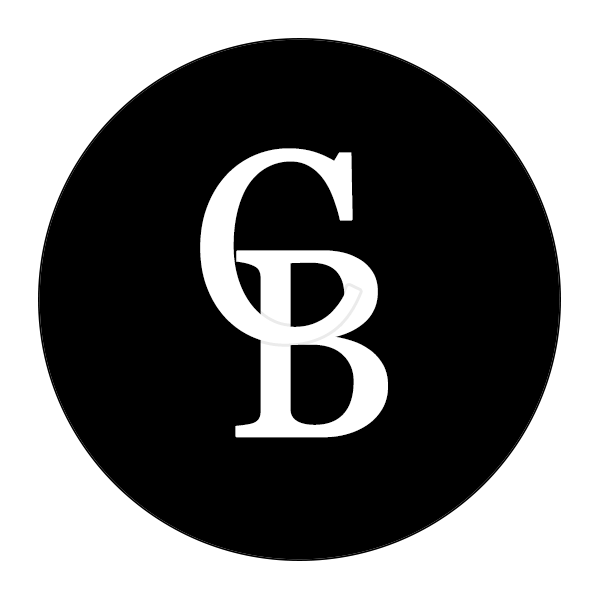
<style>
.page{position:relative;width:600px;height:600px;background:#000000}
.page>*{position:absolute;margin:0}
.t1{font:266.6px "Georgia";color:#ffffff;font-weight:bold}
</style>
<div class="page">
<p class="t1" style="left:200px;top:148px;width:160px;height:196px">C</p>
<p class="t1" style="left:235px;top:250px;width:153px;height:188px">B</p>
</div>
